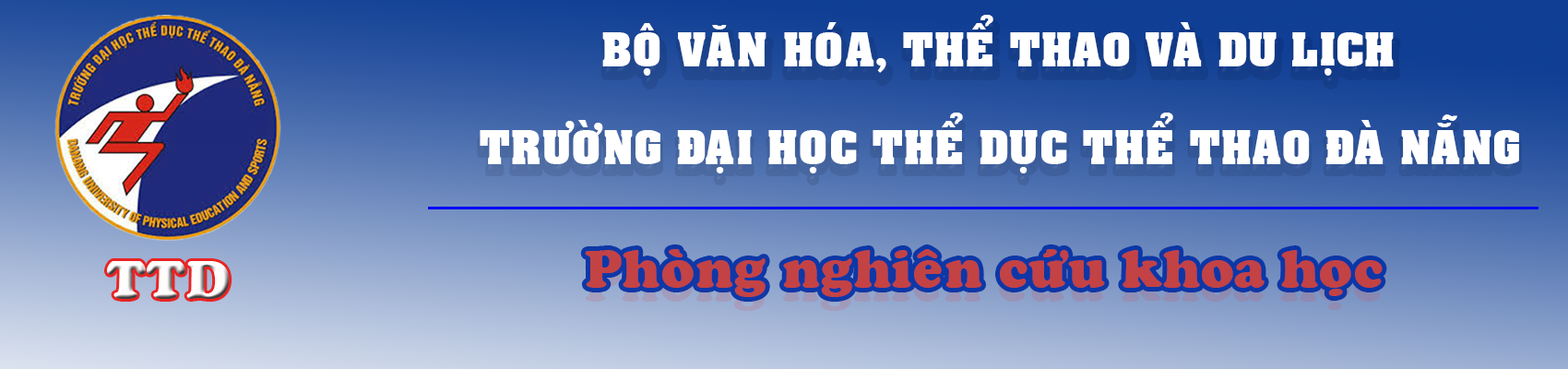
<style>
.page{position:relative;width:1568px;height:369px}
.page>*{position:absolute;margin:0}
.t1{font:51.9px "VNI-Auchon-Bold";color:#ffffff}
.t2{font:51.9px "VNI-Cooper-Heavy";color:#c53f3f}
.t3{font:51.9px "VNI-Cooper-Heavy";color:#fffcfc}
</style>
<div class="page">
<p class="t1" style="left:602px;top:15px;width:792px;height:61px">BOÄ VAÊN HOÙA, THEÅ THAO VAØ DU LÒCH</p>
<p class="t1" style="left:480px;top:113px;width:1039px;height:60px">TRÖÔØNG ÑAÏI HOÏC THEÅ DUÏC THEÅ THAO ÑAØ NAÜNG</p>
<p class="t1" style="left:480px;top:122px;width:1039px;height:61px;opacity:0.14">TRÖÔØNG ÑAÏI HOÏC THEÅ DUÏC THEÅ THAO ÑAØ NAÜNG</p>
<p class="t2" style="left:585px;top:249px;width:798px;height:48px;opacity:0.97">Phoøng nghieân cöùu khoa hoïc</p>
<p class="t3" style="left:107px;top:261px;width:123px;height:38px">TTD</p>
</div>
